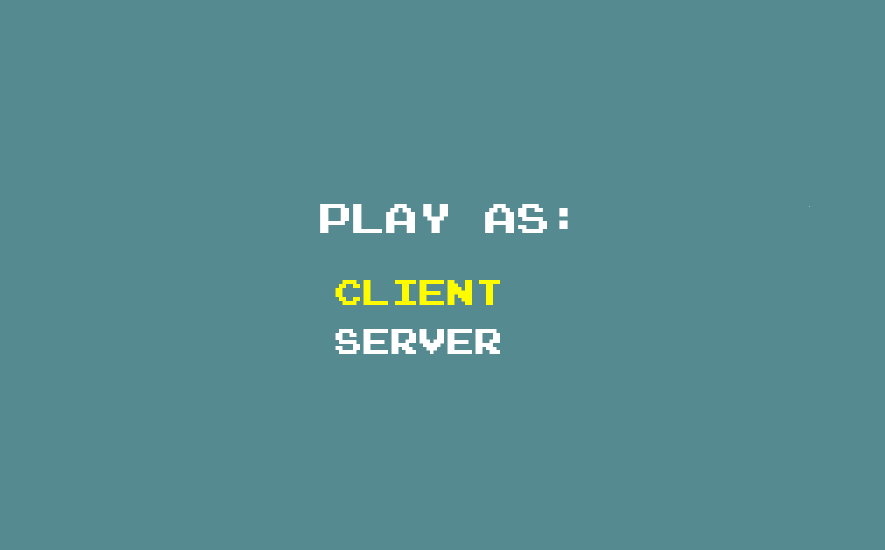
<style>
.page{position:relative;width:885px;height:550px;background:#548a90}
.page>*{position:absolute;margin:0}
.t1{font:33px "Emulogic";color:#ffffff}
.t2{font:28px "Emulogic";color:#fffc00}
.t3{font:28px "Emulogic";color:#ffffff}
</style>
<div class="page">
<p class="t1" style="left:320px;top:204px;width:248px;height:29px">PLAY AS:</p>
<p class="t2" style="left:335px;top:280px;width:165px;height:25px">CLIENT</p>
<p class="t3" style="left:335px;top:329px;width:165px;height:25px">SERVER</p>
</div>
